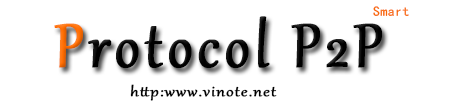
<style>
.page{position:relative;width:462px;height:106px;background:#ffffff}
.page>*{position:absolute;margin:0}
.t1{font:13.7px "¿¬Ìå";letter-spacing:0.04em;color:#f86a02}
.t2{font:75px "Gabriola";letter-spacing:0.06em;color:#000000;font-weight:bold;scale:0.91 1}
.t3{font:75px "Gabriola";letter-spacing:0.06em;color:#ff6d02;font-weight:bold;scale:0.91 1}
.t4{font:16.9px "Gabriola";letter-spacing:0.04em;color:#000000;font-weight:bold;scale:1.19 1}
</style>
<div class="page">
<p class="t1" style="left:373px;top:6px;width:36px;height:10px">Smart</p>
<p class="t2" style="left:54px;top:16px;width:328px;height:52px"><span class="t3">P</span>rotocol P2P</p>
<p class="t4" style="left:130px;top:84px;width:147px;height:17px">http:www.vinote.net</p>
</div>
